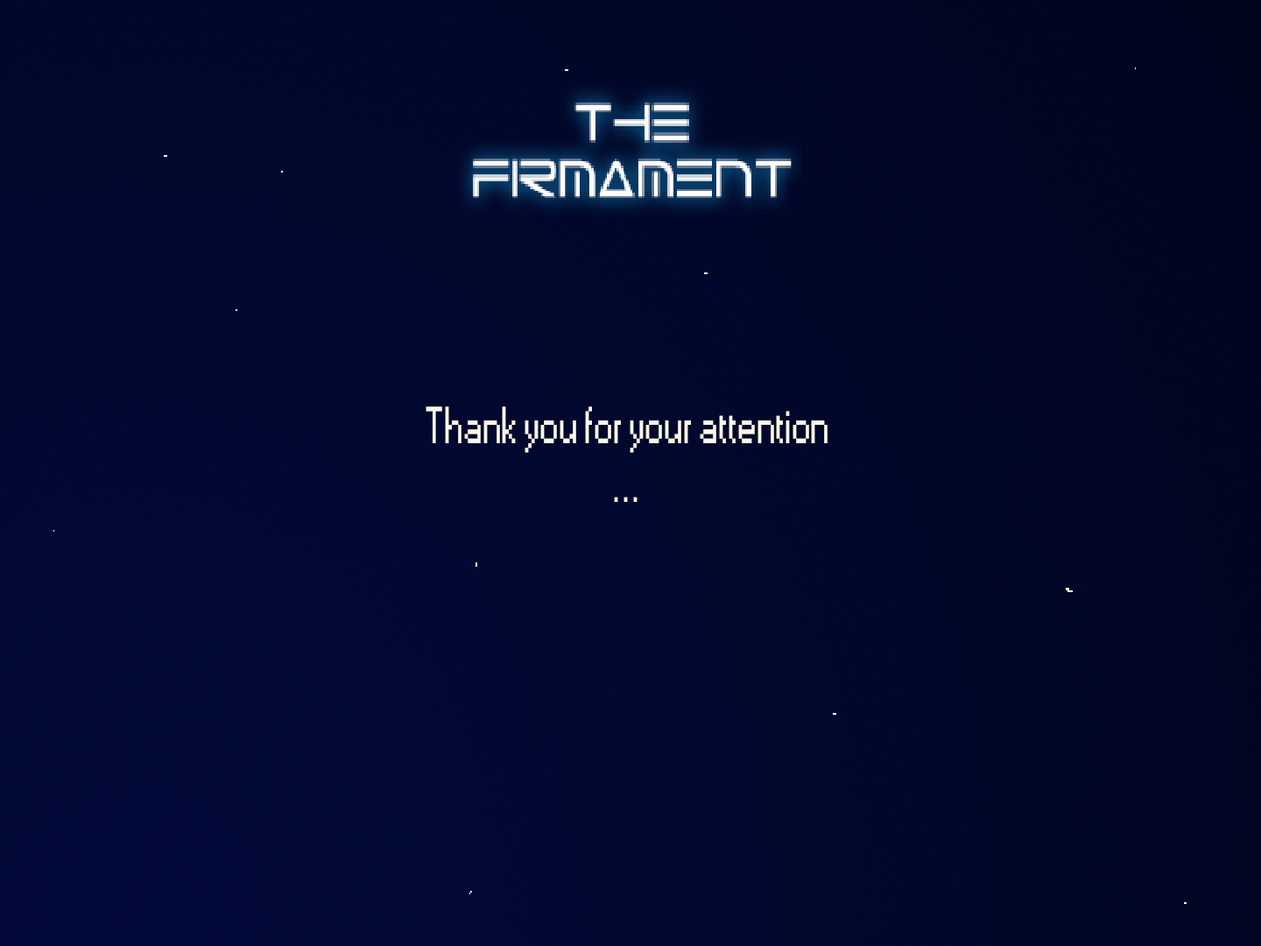
<style>
.page{position:relative;width:1261px;height:946px}
.page>*{position:absolute;margin:0}
.t1{font:48.7px "Small Fonts";color:#fcf9e9;scale:0.84 1}
</style>
<div class="page">
<p class="t1" style="left:426px;top:406px;width:401px;height:96px;text-align:center">Thank you for your attention<br>...</p>
</div>
